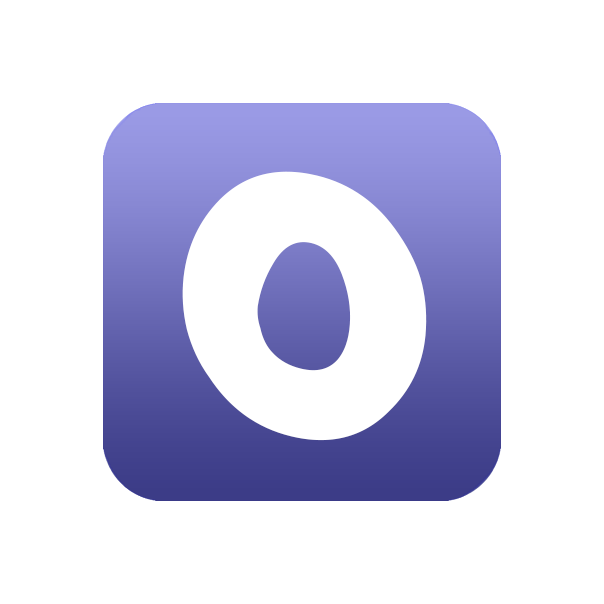
<style>
.page{position:relative;width:604px;height:604px;background:#ffffff}
.page>*{position:absolute;margin:0}
.t1{font:254.1px "ObelixPro";color:#ffffff;scale:1.22 1}
</style>
<div class="page">
<p class="t1" style="left:182px;top:171px;width:245px;height:270px;rotate:14deg">o</p>
</div>
